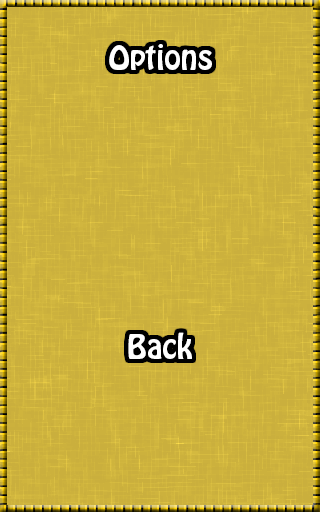
<style>
.page{position:relative;width:320px;height:512px;background:#ccb13d}
.page>*{position:absolute;margin:0}
.t1{font:30px "HoboStd";color:#ffffff}
</style>
<div class="page">
<p class="t1" style="left:109px;top:44px;width:103px;height:26px">Options</p>
<p class="t1" style="left:128px;top:332px;width:64px;height:27px">Back</p>
</div>
